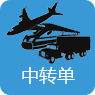
<style>
.page{position:relative;width:95px;height:95px;background:#3998d6}
.page>*{position:absolute;margin:0}
.t1{font:18px "MicrosoftYaHei";color:#ffffff}
</style>
<div class="page">
<p class="t1" style="left:22px;top:67px;width:53px;height:17px">中转单</p>
</div>
